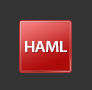
<style>
.page{position:relative;width:92px;height:90px;background:#333333}
.page>*{position:absolute;margin:0}
.t1{font:15.1px "MyriadPro-Semibold";letter-spacing:-0.04em;color:#ffffff;scale:1.15 1}
</style>
<div class="page">
<p class="t1" style="left:25px;top:41px;width:42px;height:11px">HAML</p>
</div>
